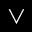
<style>
.page{position:relative;width:32px;height:32px;background:#000000}
.page>*{position:absolute;margin:0}
.t1{font:20.8px "Vonique92";letter-spacing:0.15em;color:#ffffff}
</style>
<div class="page">
<p class="t1" style="left:8px;top:9px;width:16px;height:15px">v</p>
</div>
